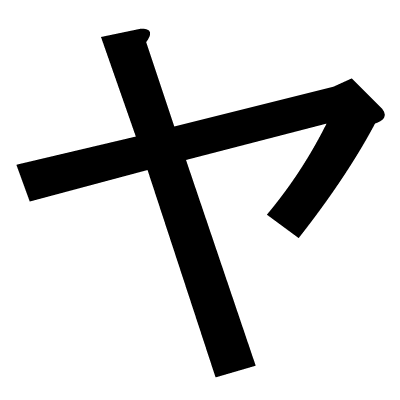
<style>
.page{position:relative;width:400px;height:400px;background:#ffffff}
.page>*{position:absolute;margin:0}
.t1{font:424.8px "MS-PGothic";color:#000000}
</style>
<div class="page">
<p class="t1" style="left:16px;top:28px;width:369px;height:350px">ヤ</p>
</div>
